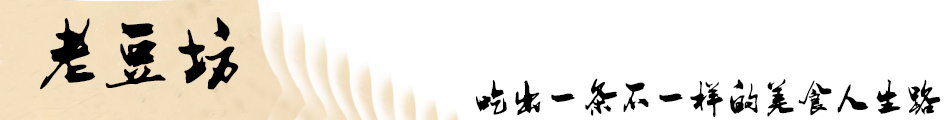
<style>
.page{position:relative;width:950px;height:120px;background:#ffffff}
.page>*{position:absolute;margin:0}
.t1{font:72px "HuJingLi-Mao";color:#000000}
.t2{font:36px "HuJingLi-Mao";color:#000000}
</style>
<div class="page">
<p class="t1" style="left:40px;top:17px;width:199px;height:73px">老豆坊</p>
<p class="t2" style="left:476px;top:78px;width:465px;height:40px">吃出一条不一样的美食人生路</p>
</div>
